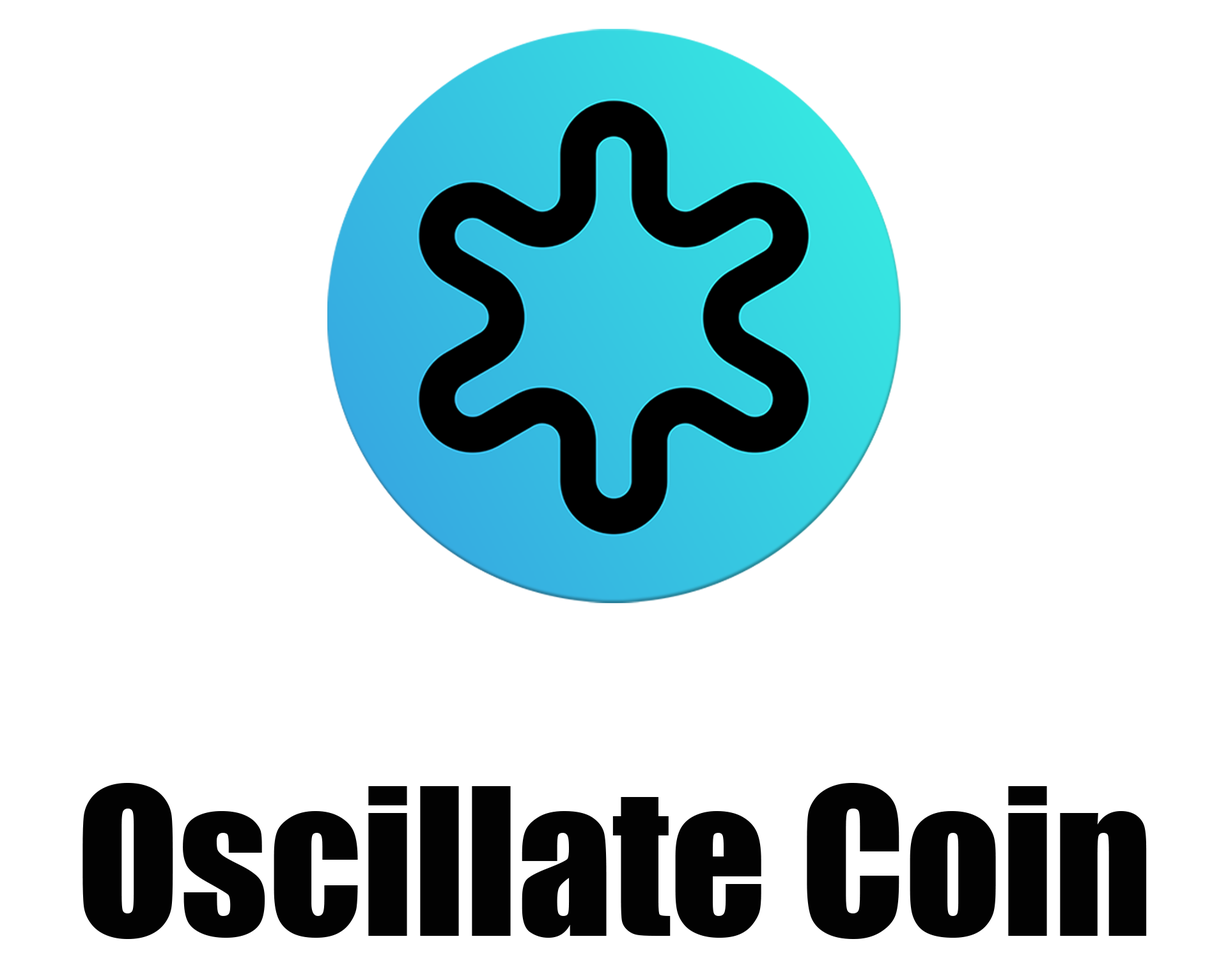
<style>
.page{position:relative;width:1228px;height:971px;background:#ffffff}
.page>*{position:absolute;margin:0}
.t1{font:189.2px "Impact";color:#020202}
</style>
<div class="page">
<p class="t1" style="left:82px;top:783px;width:1065px;height:156px">Oscillate Coin</p>
</div>
